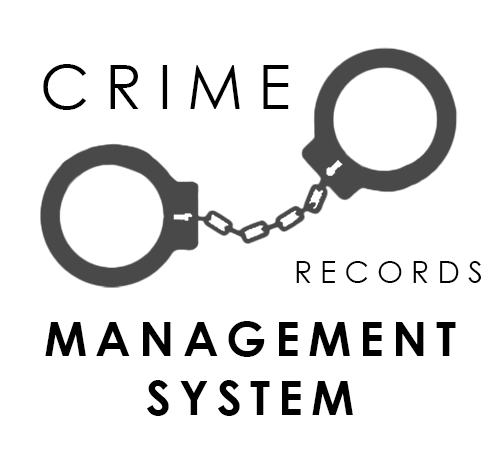
<style>
.page{position:relative;width:500px;height:464px;background:#ffffff}
.page>*{position:absolute;margin:0}
.t1{font:60.6px "CenturyGothic";letter-spacing:0.26em;color:#000000}
.t2{font:30.3px "CenturyGothic";letter-spacing:0.26em;color:#000000}
.t3{font:48.5px/59.4px "CenturyGothic-Bold";letter-spacing:0.16em;color:#000000}
</style>
<div class="page">
<p class="t1" style="left:43px;top:64px;width:246px;height:46px">CRIME</p>
<p class="t2" style="left:296px;top:261px;width:186px;height:22px">RECORDS</p>
<p class="t3" style="left:45px;top:321px;width:411px;height:95px;text-align:center">MANAGEMENT <br>SYSTEM</p>
</div>
